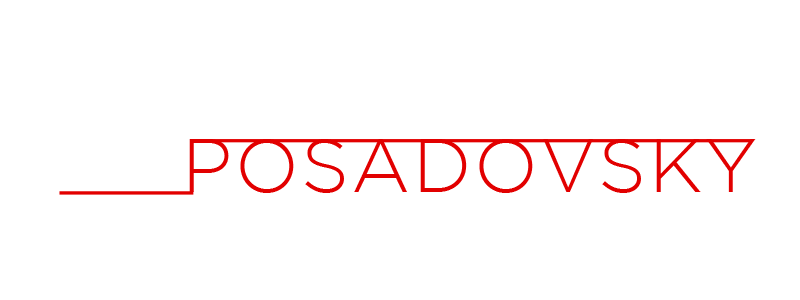
<style>
.page{position:relative;width:800px;height:300px;background:#ffffff}
.page>*{position:absolute;margin:0}
.t1{font:75.5px "GothamLight";letter-spacing:0.03em;color:#e20000}
</style>
<div class="page">
<p class="t1" style="left:189px;top:139px;width:567px;height:54px">POSADOVSKY</p>
</div>
